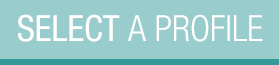
<style>
.page{position:relative;width:279px;height:65px;background:#99cccc}
.page>*{position:absolute;margin:0}
.t1{font:36px "HelveticaNeueLTCom-LtCn";color:#ffffff}
.t2{font:36px "HelveticaNeueLTCom-Cn";color:#ffffff}
</style>
<div class="page">
<p class="t1" style="left:18px;top:14px;width:245px;height:28px"><span class="t2">SELECT </span>A PROFILE</p>
</div>
